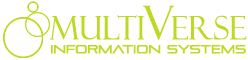
<style>
.page{position:relative;width:248px;height:60px;background:#ffffff}
.page>*{position:absolute;margin:0}
.t1{font:11.8px "PirulenRg-Regular";color:#bbdb22}
.t2{font:32.2px "FelixTitlingMT";color:#bbdb22}
.t3{font:32.2px "FelixTitlingMT";letter-spacing:-0.08em;color:#bbdb22}
.t4{font:46.5px "FelixTitlingMT";letter-spacing:-0.08em;color:#bbdb22}
</style>
<div class="page">
<p class="t1" style="left:50px;top:5px;width:197px;height:49px"><span class="t2">MULT</span><span class="t3">I</span><span class="t4">V</span><span class="t2">E</span><span class="t2">RSE<br></span>INFORMATION SYSTEMS</p>
</div>
